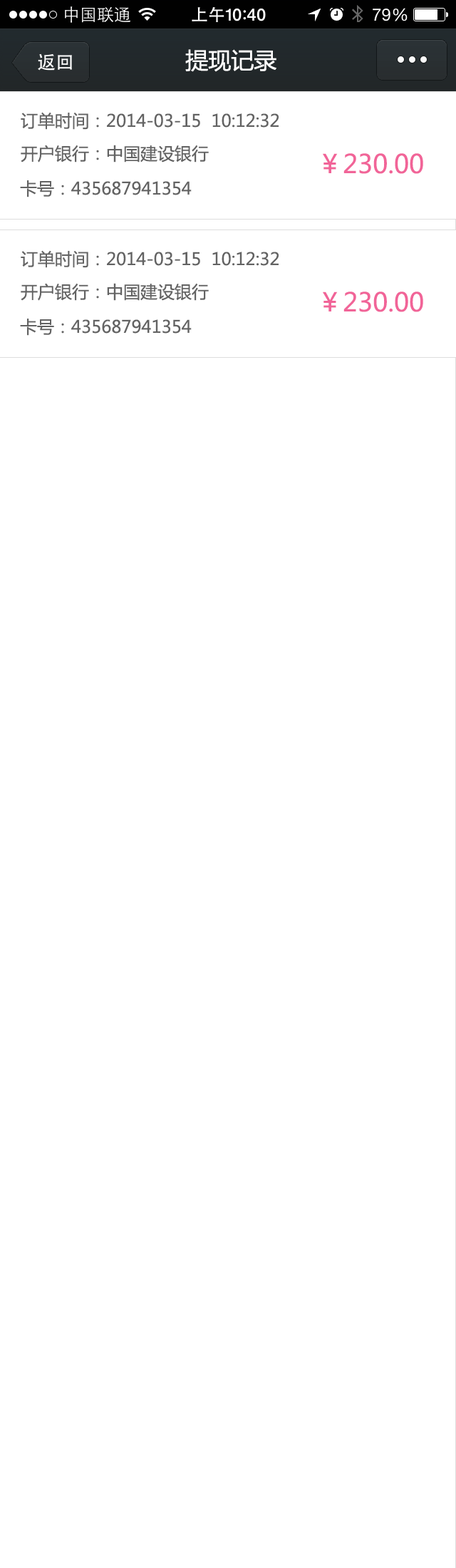
<style>
.page{position:relative;width:456px;height:1568px;background:#ffffff}
.page>*{position:absolute;margin:0}
.t1{font:22.8px "MicrosoftYaHei";color:#ffffff}
.t2{font:17.1px "MicrosoftYaHei";color:#636363}
.t3{font:25.7px "MicrosoftYaHei";color:#f16498}
</style>
<div class="page">
<p class="t1" style="left:185px;top:49px;width:92px;height:23px">提现记录</p>
<p class="t2" style="left:21px;top:112px;width:258px;height:18px">订单时间：2014-03-15  10:12:32</p>
<p class="t2" style="left:21px;top:145px;width:188px;height:18px">开户银行：中国建设银行</p>
<p class="t3" style="left:323px;top:153px;width:100px;height:21px">￥230.00</p>
<p class="t2" style="left:20px;top:180px;width:172px;height:17px">卡号：435687941354</p>
<p class="t2" style="left:21px;top:250px;width:258px;height:18px">订单时间：2014-03-15  10:12:32</p>
<p class="t2" style="left:21px;top:283px;width:188px;height:18px">开户银行：中国建设银行</p>
<p class="t3" style="left:323px;top:292px;width:100px;height:20px">￥230.00</p>
<p class="t2" style="left:20px;top:319px;width:172px;height:17px">卡号：435687941354</p>
</div>
